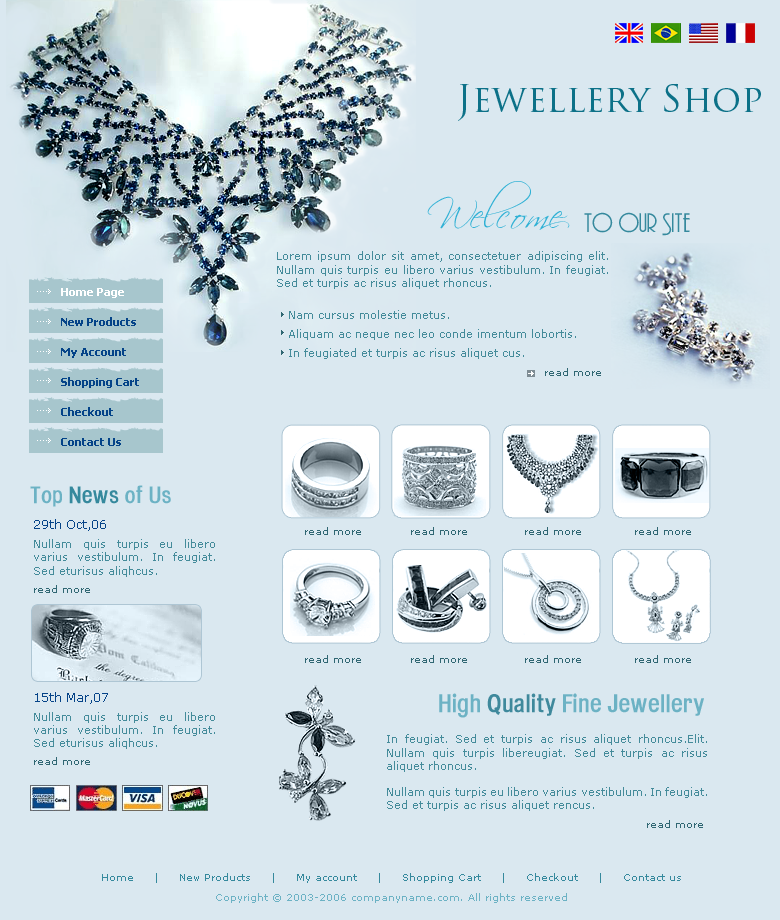
<style>
.page{position:relative;width:780px;height:920px;background:#dae8f0}
.page>*{position:absolute;margin:0}
.t1{font:36px "TrajanPro-Regular";color:#0c7188}
.t2{font:39px "Scriptina";color:#30b1d5}
.t3{font:25px "Andes";color:#35899d}
.t4{font:11px "Verdana";color:#448b9a}
.t5{font:11px/19px "Verdana";color:#448b9a}
.t6{font:10px/19px "Verdana";color:#306773}
.t7{font:11px/30px "Tahoma-Bold";color:#044388}
.t8{font:11px/30px "Tahoma-Bold";color:#ffffff}
.t9{font:23px "HeadacheNormal";color:#6cb2c4}
.t10{font:23px "HeadacheNormal";color:#35899d}
.t11{font:12px/19px "Verdana";color:#044388}
.t12{font:10px/18px "Verdana";color:#306773}
.t13{font:10px "Verdana";color:#306773}
.t14{font:25px "HeadacheNormal";color:#6cb2c4}
.t15{font:25px "HeadacheNormal";color:#3f899c}
.t16{font:10px/20px "Verdana";color:#35899d}
.t17{font:10px/20px "Verdana";color:#6cb2c4}
</style>
<div class="page">
<p class="t1" style="left:458px;top:83px;width:303px;height:38px">Jewellery Shop</p>
<p class="t2" style="left:427px;top:181px;width:143px;height:49px">Welcome</p>
<p class="t3" style="left:584px;top:212px;width:106px;height:24px">to our Site</p>
<p class="t4" style="left:277px;top:251px;width:331px;height:125px;text-align:justify">Lorem ipsum dolor sit amet, consectetuer adipiscing elit. Nullam quis turpis eu libero varius vestibulum. In feugiat. Sed et turpis ac risus aliquet rhoncus. <br><br>   <span class="t5">Nam cursus molestie metus. <br>   Aliquam ac neque nec leo conde imentum lobortis.<br>   In feugiated et turpis ac risus aliquet cus.<br>                                                                   </span><span class="t6">read more</span></p>
<p class="t7" style="left:61px;top:288px;width:78px;height:158px"><span class="t8">Home Page<br></span>New Products<br>My Account<br>Shopping Cart<br>Checkout<br>Contact Us</p>
<p class="t9" style="left:30px;top:485px;width:141px;height:22px">Top <span class="t10">News</span> of Us</p>
<p class="t4" style="left:34px;top:519px;width:181px;height:246px;text-align:justify"><span class="t11">29th Oct,06<br></span><span class="t5">Nullam quis turpis eu libero </span>varius vestibulum. In feugiat. Sed eturisus aliqhcus.<br><span class="t12">read more<br><br><br><br><br><br></span><span class="t11">15th Mar,07<br></span><span class="t5">Nullam quis turpis eu libero </span>varius vestibulum. In feugiat. Sed eturisus aliqhcus.<br><span class="t12">read more</span></p>
<p class="t13" style="left:305px;top:527px;width:386px;height:8px">read more            read more              read more             read more</p>
<p class="t13" style="left:305px;top:655px;width:386px;height:8px">read more            read more              read more             read more</p>
<p class="t14" style="left:439px;top:693px;width:265px;height:25px">High <span class="t15">Quality</span> Fine Jewellery</p>
<p class="t4" style="left:387px;top:734px;width:320px;height:94px;text-align:justify">In feugiat. Sed et turpis ac risus aliquet rhoncus.Elit. Nullam quis turpis libereugiat. Sed et turpis ac risus aliquet rhoncus.<br><br>Nullam quis turpis eu libero varius vestibulum. In feugiat. Sed et turpis ac risus aliquet rencus.<br>                                                                 <span class="t6">read more</span></p>
<p class="t16" style="left:102px;top:873px;width:579px;height:30px;text-align:center">Home     |     New Products     |     My account     |     Shopping Cart     |     Checkout     |     Contact us<br><span class="t17">Copyright © 2003-2006 companyname.com. All rights reserved</span></p>
</div>
